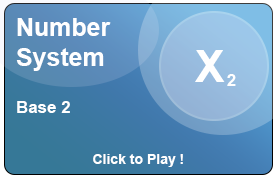
<style>
.page{position:relative;width:276px;height:177px}
.page>*{position:absolute;margin:0}
.t1{font:25px "Arial-BoldMT";color:#ffffff}
.t2{font:44px "Arial-BoldMT";color:#ffffff}
.t3{font:16.5px "Arial-BoldMT";color:#ffffff}
.t4{font:17px "Arial-BoldMT";color:#ffffff}
.t5{font:14px "Arial-BoldMT";color:#ffffff}
</style>
<div class="page">
<p class="t1" style="left:16px;top:18px;width:95px;height:53px">Number<br>System</p>
<p class="t2" style="left:195px;top:50px;width:30px;height:32px">X</p>
<p class="t3" style="left:227px;top:74px;width:9px;height:12px">2</p>
<p class="t4" style="left:17px;top:101px;width:53px;height:12px">Base 2</p>
<p class="t5" style="left:93px;top:154px;width:90px;height:13px">Click to Play !</p>
</div>
